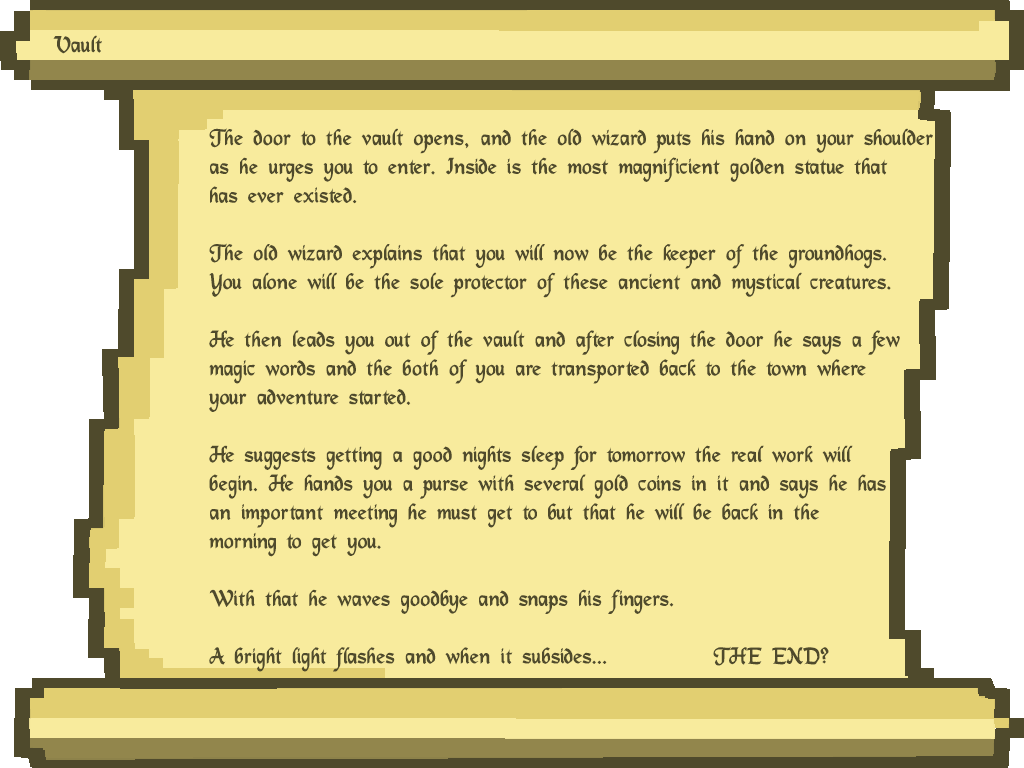
<style>
.page{position:relative;width:1024px;height:768px;background:#f8eb9d}
.page>*{position:absolute;margin:0}
.t1{font:24px "DS_Mysticora";color:#4f4a2c}
</style>
<div class="page">
<p class="t1" style="left:53px;top:35px;width:49px;height:19px">Vault</p>
<p class="t1" style="left:209px;top:128px;width:724px;height:544px">The door to the vault opens, and the old wizard puts his hand on your shoulder<br>as he urges you to enter. Inside is the most magnificient golden statue that<br>has ever existed. <br><br>The old wizard explains that you will now be the keeper of the groundhogs.<br>You alone will be the sole protector of these ancient and mystical creatures.<br><br>He then leads you out of the vault and after closing the door he says a few<br>magic words and the both of you are transported back to the town where<br>your adventure started. <br><br>He suggests getting a good nights sleep for tomorrow the real work will<br>begin. He hands you a purse with several gold coins in it and says he has<br>an important meeting he must get to but that he will be back in the<br>morning to get you.<br><br>With that he waves goodbye and snaps his fingers.<br><br>A bright light flashes and when it subsides...   THE END?</p>
</div>
